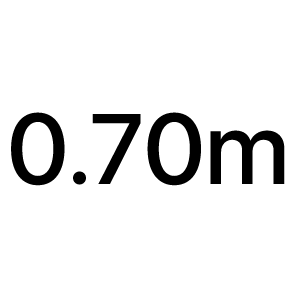
<style>
.page{position:relative;width:300px;height:300px;background:#ffffff}
.page>*{position:absolute;margin:0}
.t1{font:99px "SFUIDisplay-Medium";color:#000000}
</style>
<div class="page">
<p class="t1" style="left:11px;top:112px;width:274px;height:74px">0.70m</p>
</div>
